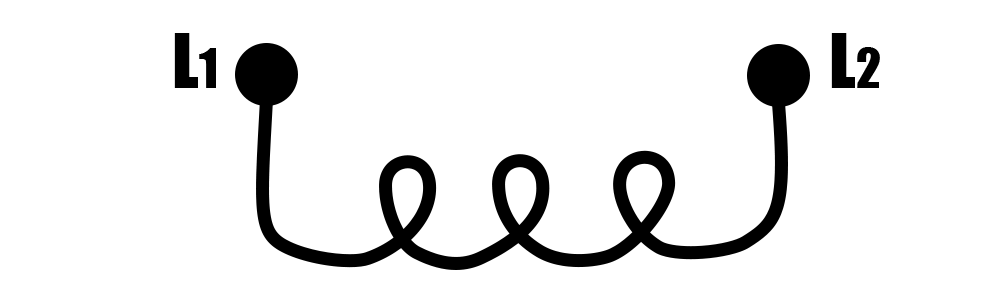
<style>
.page{position:relative;width:1000px;height:300px;background:#ffffff}
.page>*{position:absolute;margin:0}
.t1{font:70px "Impact";color:#000000}
.t2{font:50px "Impact";color:#000000}
</style>
<div class="page">
<p class="t1" style="left:174px;top:33px;width:42px;height:55px">L<span class="t2">1</span></p>
<p class="t1" style="left:831px;top:33px;width:49px;height:55px">L<span class="t2">2</span></p>
</div>
